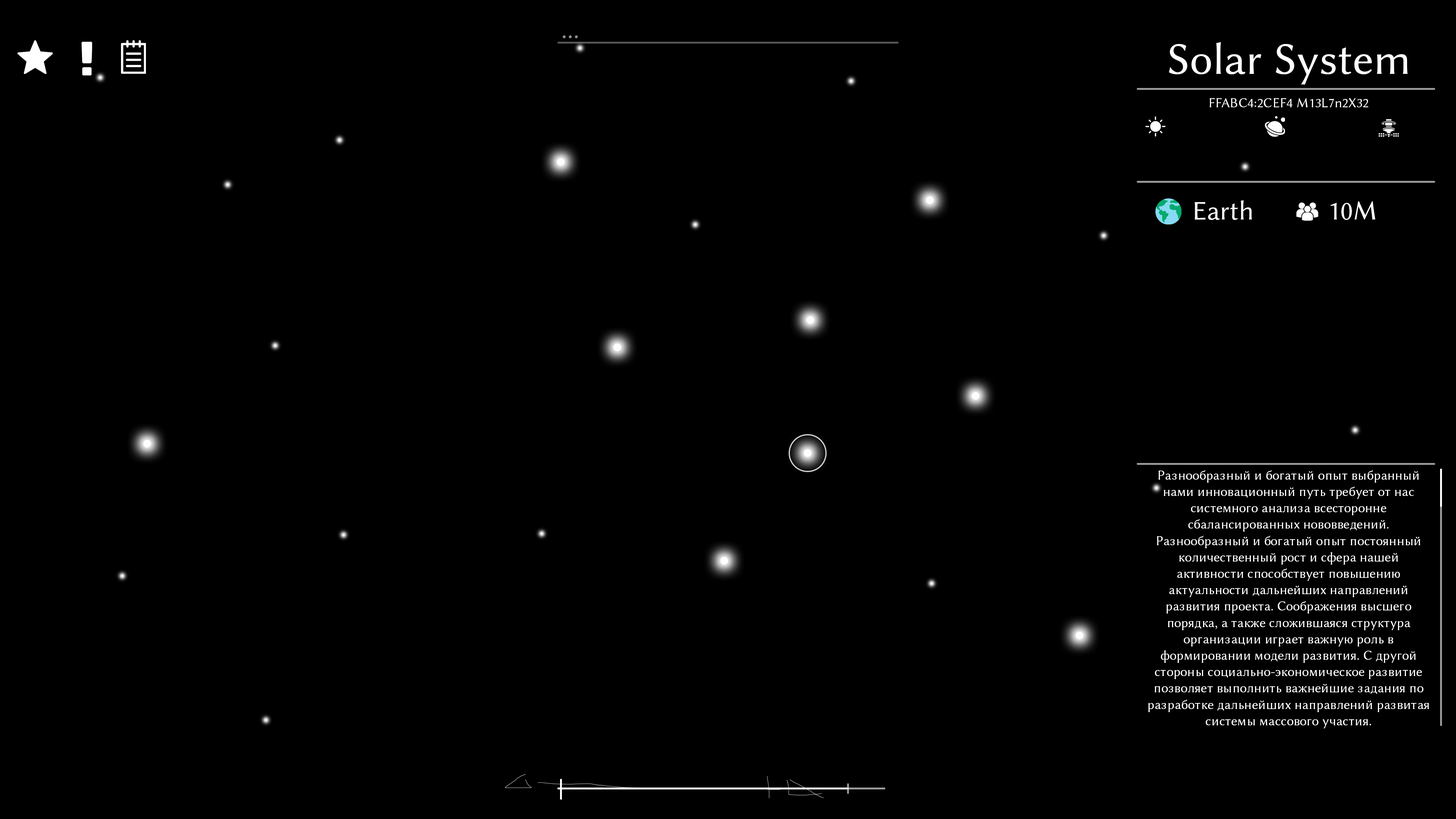
<style>
.page{position:relative;width:1456px;height:819px;background:#000000}
.page>*{position:absolute;margin:0}
.t1{font:27.3px "LinBiolinumO";color:#8c8c8c}
.t2{font:45.5px "LinBiolinumO";color:#ffffff}
.t3{font:13.6px "LinBiolinumO";color:#ffffff}
.t4{font:27.3px "LinBiolinumO";color:#ffffff}
</style>
<div class="page">
<p class="t1" style="left:563px;top:35px;width:15px;height:3px">...</p>
<p class="t2" style="left:1169px;top:42px;width:239px;height:43px">Solar System</p>
<p class="t3" style="left:1210px;top:98px;width:158px;height:9px">FFABC4:2CEF4 M13L7n2X32</p>
<p class="t4" style="left:1195px;top:200px;width:57px;height:20px">Earth</p>
<p class="t4" style="left:1330px;top:201px;width:45px;height:19px">10M</p>
<p class="t3" style="left:1148px;top:470px;width:281px;height:258px;text-align:center">Разнообразный и богатый опыт выбранный нами инновационный путь требует от нас системного анализа всесторонне сбалансированных нововведений. Разнообразный и богатый опыт постоянный количественный рост и сфера нашей активности способствует повышению актуальности дальнейших направлений развития проекта. Соображения высшего порядка, а также сложившаяся структура организации играет важную роль в формировании модели развития. С другой стороны социально-экономическое развитие позволяет выполнить важнейшие задания по разработке дальнейших направлений развитая системы массового участия.</p>
</div>
